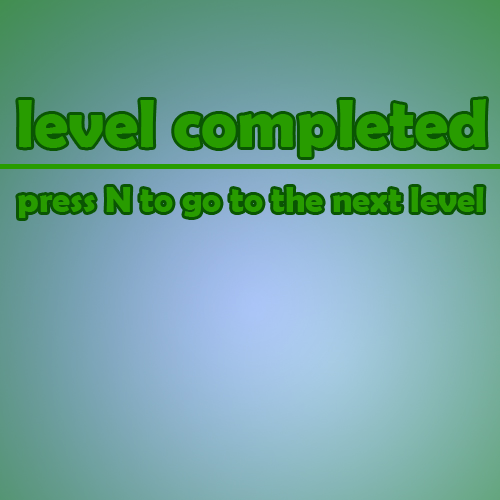
<style>
.page{position:relative;width:500px;height:500px}
.page>*{position:absolute;margin:0}
.t1{font:67.6px "BerlinSansFBDemi-Bold";color:#289c00}
.t2{font:35.8px "BerlinSansFBDemi-Bold";color:#289c00}
</style>
<div class="page">
<p class="t1" style="left:18px;top:99px;width:468px;height:58px">level completed</p>
<p class="t2" style="left:18px;top:187px;width:466px;height:31px">press N to go to the next level</p>
</div>
